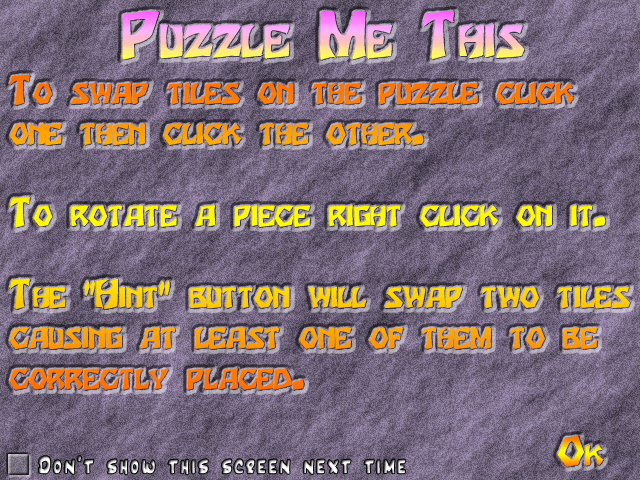
<style>
.page{position:relative;width:640px;height:480px}
.page>*{position:absolute;margin:0}
.t1{font:54px "Houters-Normal";font-variant:small-caps;font-weight:bold}
.t2{font:34px "Houters-Normal";font-variant:small-caps;font-weight:bold}
.t3{font:24px "Inkpen2Script";letter-spacing:0.1em;font-weight:bold}
</style>
<div class="page">
<p class="t1" style="left:122px;top:11px;width:403px;height:49px">Puzzle Me This</p>
<p class="t2" style="left:9px;top:74px;width:621px;height:316px">To swap tiles on the puzzle click<br>one then click the other.<br><br>To rotate a piece right click on it.<br><br>The "Hint" button will swap two tiles<br>causing at least one of them to be <br>correctly placed.</p>
<p class="t2" style="left:558px;top:436px;width:46px;height:31px">Ok</p>
<p class="t3" style="left:39px;top:456px;width:367px;height:19px">Don’t show this screen next time</p>
</div>
